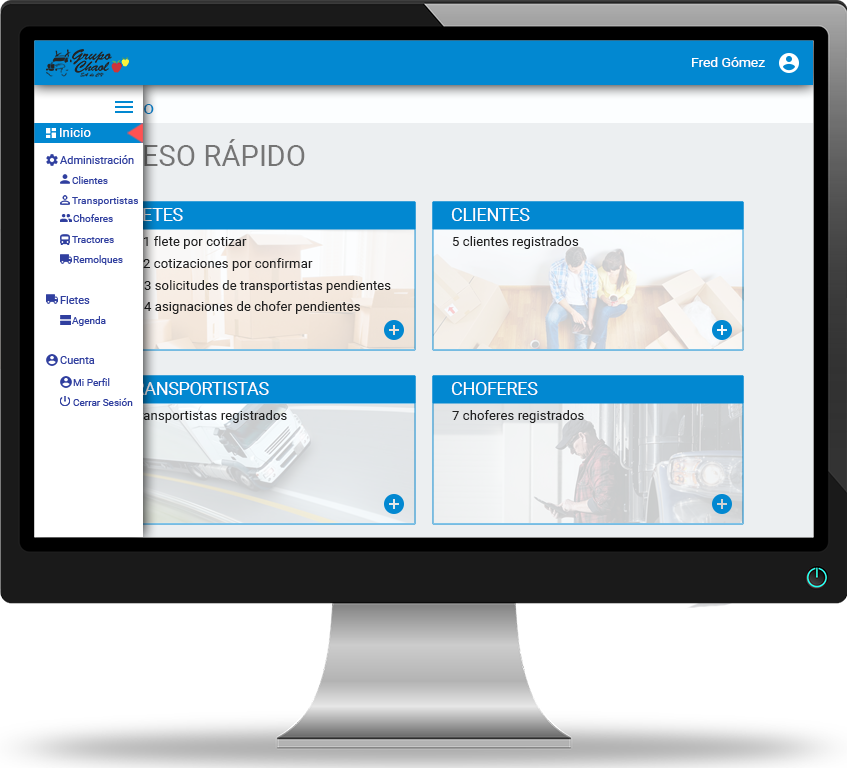
<style>
.page{position:relative;width:847px;height:768px}
.page>*{position:absolute;margin:0}
.t1{font:13.3px "Roboto-Regular";color:#ffffff;scale:1.04 1}
.t2{font:13.3px "Roboto-Regular";color:#ffffff}
.t3{font:29.1px "Roboto-Regular";color:#757575}
.t4{font:10.7px "Roboto-Regular";color:#303f9f;scale:1.03 1}
.t5{font:10px "Roboto-Regular";color:#303f9f}
.t6{font:10px "Roboto-Regular";color:#303f9f;scale:1.03 1}
.t7{font:17.8px "Roboto-Regular";color:#fffefe}
.t8{font:13.3px "Roboto-Regular";color:#212121}
</style>
<div class="page">
<p class="t1" style="left:692px;top:57px;width:73px;height:10px">Fred Gómez</p>
<p class="t2" style="left:60px;top:128px;width:31px;height:9px">Inicio</p>
<p class="t3" style="left:85px;top:139px;width:220px;height:27px">ACCESO RÁPIDO</p>
<p class="t4" style="left:60px;top:155px;width:74px;height:9px">Administración</p>
<p class="t5" style="left:72px;top:176px;width:36px;height:8px">Clientes</p>
<p class="t6" style="left:72px;top:197px;width:66px;height:9px">Transportistas</p>
<p class="t7" style="left:124px;top:208px;width:59px;height:13px">FLETES</p>
<p class="t7" style="left:451px;top:208px;width:79px;height:13px">CLIENTES</p>
<p class="t5" style="left:73px;top:214px;width:40px;height:8px">Choferes</p>
<p class="t5" style="left:72px;top:236px;width:42px;height:7px">Tractores</p>
<p class="t8" style="left:144px;top:236px;width:103px;height:13px">1 flete por cotizar</p>
<p class="t8" style="left:452px;top:236px;width:127px;height:13px">5 clientes registrados</p>
<p class="t5" style="left:73px;top:255px;width:50px;height:10px">Remolques</p>
<p class="t8" style="left:143px;top:258px;width:170px;height:13px">2 cotizaciones por confirmar</p>
<p class="t8" style="left:144px;top:280px;width:247px;height:13px">3 solicitudes de transportistas pendientes</p>
<p class="t4" style="left:60px;top:296px;width:30px;height:8px">Fletes</p>
<p class="t8" style="left:144px;top:301px;width:216px;height:13px">4 asignaciones de chofer pendientes</p>
<p class="t5" style="left:72px;top:316px;width:34px;height:10px">Agenda</p>
<p class="t4" style="left:60px;top:356px;width:35px;height:8px">Cuenta</p>
<p class="t5" style="left:73px;top:378px;width:37px;height:8px">Mi Perfil</p>
<p class="t7" style="left:123px;top:382px;width:146px;height:13px">TRANSPORTISTAS</p>
<p class="t7" style="left:451px;top:382px;width:87px;height:13px">CHOFERES</p>
<p class="t5" style="left:73px;top:398px;width:60px;height:8px">Cerrar Sesión</p>
<p class="t8" style="left:124px;top:410px;width:163px;height:13px">6 transportistas registrados</p>
<p class="t8" style="left:452px;top:410px;width:132px;height:13px">7 choferes registrados</p>
</div>
